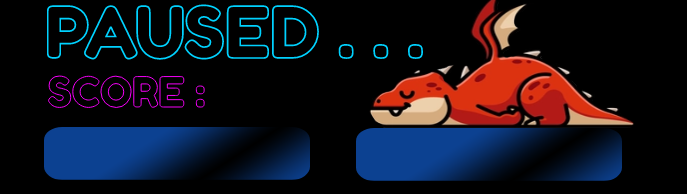
<style>
.page{position:relative;width:687px;height:194px;background:#000000}
.page>*{position:absolute;margin:0}
.t1{font:70.8px "FredokaOne-Regular";color:#000000}
</style>
<div class="page">
<p class="t1" style="left:46px;top:4px;width:378px;height:56px">PAUSED . . .</p>
</div>
